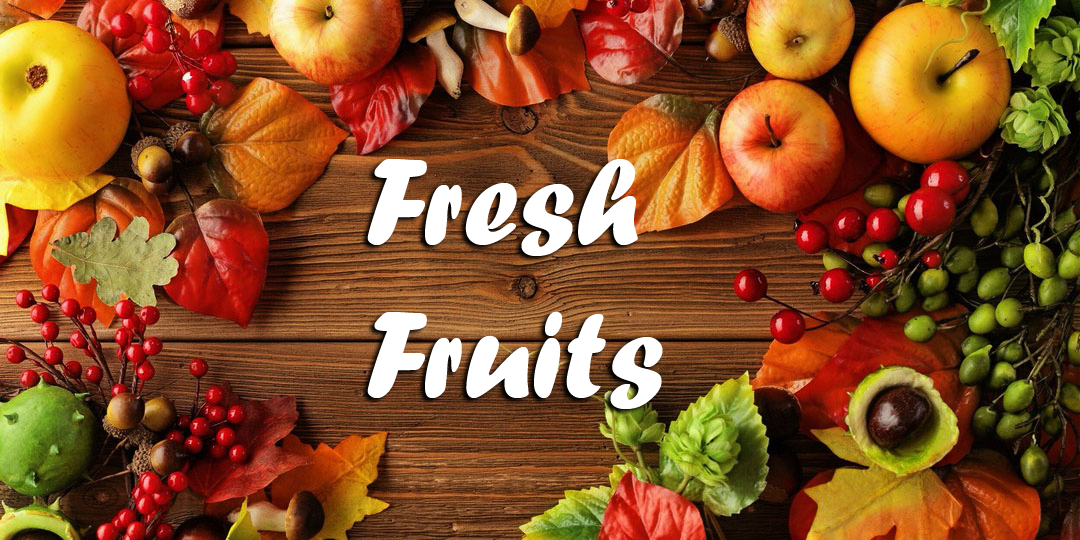
<style>
.page{position:relative;width:1080px;height:540px}
.page>*{position:absolute;margin:0}
.t1{font:127.8px "ForteMT";color:#ffffff}
</style>
<div class="page">
<p class="t1" style="left:367px;top:159px;width:296px;height:250px">Fresh <br>Fruits</p>
</div>
